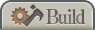
<style>
.page{position:relative;width:95px;height:30px;background:#c5c2b9}
.page>*{position:absolute;margin:0}
.t1{font:20px "RyuminPro-ExBold";letter-spacing:-0.08em;color:#6b6761;scale:0.9 1}
</style>
<div class="page">
<p class="t1" style="left:46px;top:9px;width:39px;height:15px">Build</p>
</div>
